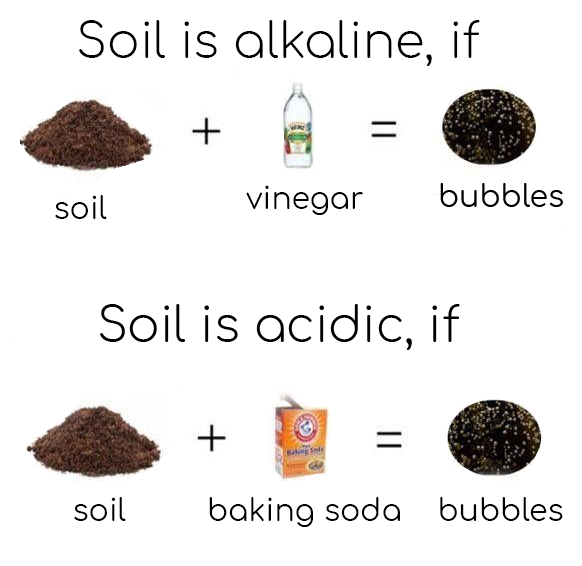
<style>
.page{position:relative;width:582px;height:566px;background:#ffffff}
.page>*{position:absolute;margin:0}
.t1{font:48px "Comfortaa-Light";color:#000000}
.t2{font:30px "Comfortaa-Regular";color:#000000}
</style>
<div class="page">
<p class="t1" style="left:79px;top:20px;width:401px;height:46px">Soil is alkaline, if</p>
<p class="t2" style="left:246px;top:185px;width:117px;height:30px">vinegar</p>
<p class="t2" style="left:55px;top:195px;width:52px;height:24px">soil</p>
<p class="t2" style="left:74px;top:497px;width:52px;height:24px">soil</p>
<p class="t2" style="left:209px;top:497px;width:191px;height:30px">baking soda</p>
<p class="t2" style="left:440px;top:497px;width:123px;height:24px">bubbles</p>
</div>
